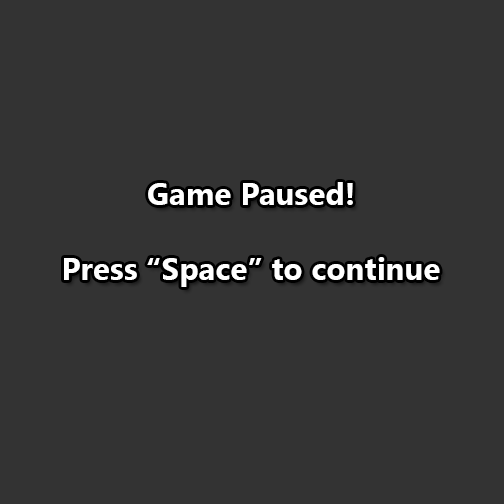
<style>
.page{position:relative;width:504px;height:504px;background:#333333}
.page>*{position:absolute;margin:0}
.t1{font:31.4px "SegoeUI-Bold";color:#ffffff}
</style>
<div class="page">
<p class="t1" style="left:64px;top:182px;width:376px;height:105px;text-align:center">Game Paused!<br><br>Press “Space” to continue</p>
</div>
